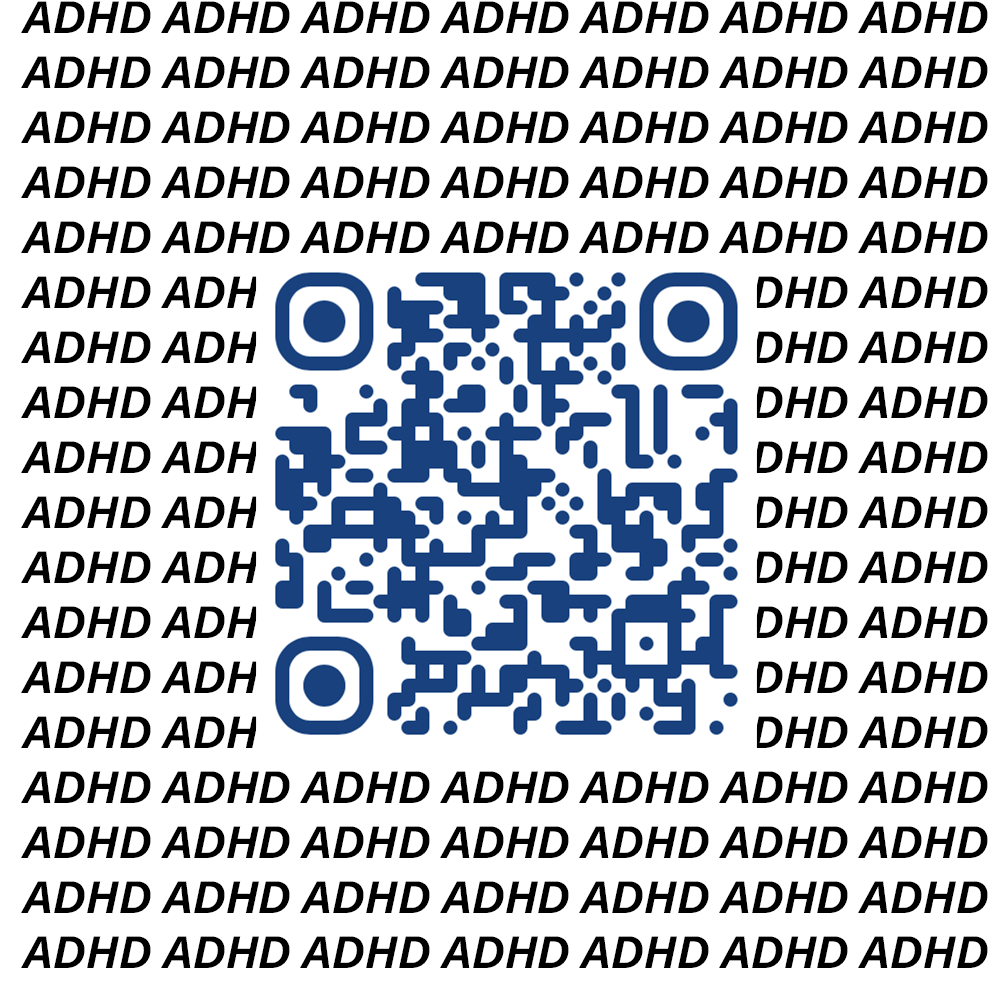
<style>
.page{position:relative;width:1000px;height:1000px;background:#ffffff}
.page>*{position:absolute;margin:0}
.t1{font:45.8px "AcuminConcept-BoldItalic";color:#000000}
</style>
<div class="page">
<p class="t1" style="left:21px;top:1px;width:967px;height:967px;text-align:center">ADHD ADHD ADHD ADHD ADHD ADHD ADHD ADHD ADHD ADHD ADHD ADHD ADHD ADHD ADHD ADHD ADHD ADHD ADHD ADHD ADHD ADHD ADHD ADHD ADHD ADHD ADHD ADHD ADHD ADHD ADHD ADHD ADHD ADHD ADHD ADHD ADHD ADHD ADHD ADHD ADHD ADHD ADHD ADHD ADHD ADHD ADHD ADHD ADHD ADHD ADHD ADHD ADHD ADHD ADHD ADHD ADHD ADHD ADHD ADHD ADHD ADHD ADHD ADHD ADHD ADHD ADHD ADHD ADHD ADHD ADHD ADHD ADHD ADHD ADHD ADHD ADHD ADHD ADHD ADHD ADHD ADHD ADHD ADHD ADHD ADHD ADHD ADHD ADHD ADHD ADHD ADHD ADHD ADHD ADHD ADHD ADHD ADHD ADHD ADHD ADHD ADHD ADHD ADHD ADHD ADHD ADHD ADHD ADHD ADHD ADHD ADHD ADHD ADHD ADHD ADHD ADHD ADHD ADHD ADHD ADHD ADHD ADHD ADHD ADHD ADHD</p>
</div>
